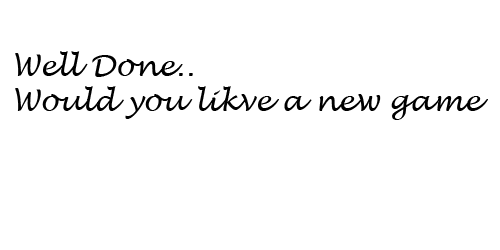
<style>
.page{position:relative;width:500px;height:250px;background:#ffffff}
.page>*{position:absolute;margin:0}
.t1{font:29px "LucidaHandwriting-Italic";color:#000000}
</style>
<div class="page">
<p class="t1" style="left:15px;top:51px;width:473px;height:69px">Well Done..<br>Would you likve a new game</p>
</div>
